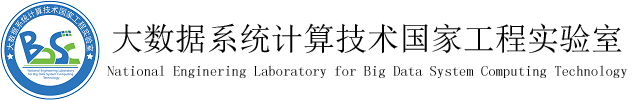
<style>
.page{position:relative;width:640px;height:100px;background:#ffffff}
.page>*{position:absolute;margin:0}
.t1{font:32px "SimSun";color:#030202}
.t2{font:14.7px "SimSun";color:#030202}
</style>
<div class="page">
<p class="t1" style="left:112px;top:23px;width:510px;height:31px">大数据系统计算技术国家工程实验室</p>
<p class="t2" style="left:107px;top:65px;width:520px;height:13px">National Enginering Laboratory for Big Data System Computing Technology</p>
</div>
